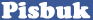
<style>
.page{position:relative;width:93px;height:20px;background:#3a5896}
.page>*{position:absolute;margin:0}
.t1{font:24px "CooperBlack";color:#ffffff;font-weight:bold}
</style>
<div class="page">
<p class="t1" style="left:1px;top:1px;width:90px;height:18px">Pisbuk</p>
</div>
